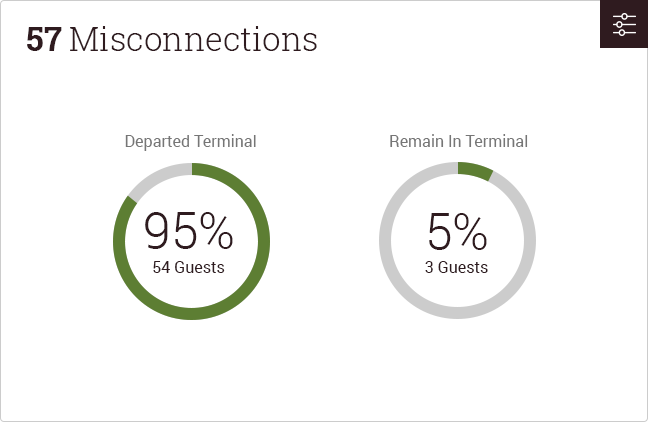
<style>
.page{position:relative;width:648px;height:422px;background:#ffffff}
.page>*{position:absolute;margin:0}
.t1{font:33px "RobotoSlab-Light";color:#2f1b1f}
.t2{font:33px "RobotoSlab-Bold";color:#2f1b1f}
.t3{font:16px "Roboto-Regular";color:#767676}
.t4{font:50px "Roboto-Light";color:#2f1b1f}
.t5{font:16px "Roboto-Regular";color:#2f1b1f}
</style>
<div class="page">
<p class="t1" style="left:27px;top:26px;width:290px;height:25px"><span class="t2">57</span> Misconnections</p>
<p class="t3" style="left:125px;top:134px;width:131px;height:17px">Departed Terminal</p>
<p class="t3" style="left:390px;top:134px;width:138px;height:13px">Remain In Terminal</p>
<p class="t4" style="left:145px;top:212px;width:88px;height:37px">95%</p>
<p class="t4" style="left:429px;top:213px;width:58px;height:37px">5%</p>
<p class="t5" style="left:153px;top:261px;width:72px;height:12px">54 Guests</p>
<p class="t5" style="left:425px;top:261px;width:63px;height:12px">3 Guests</p>
</div>
